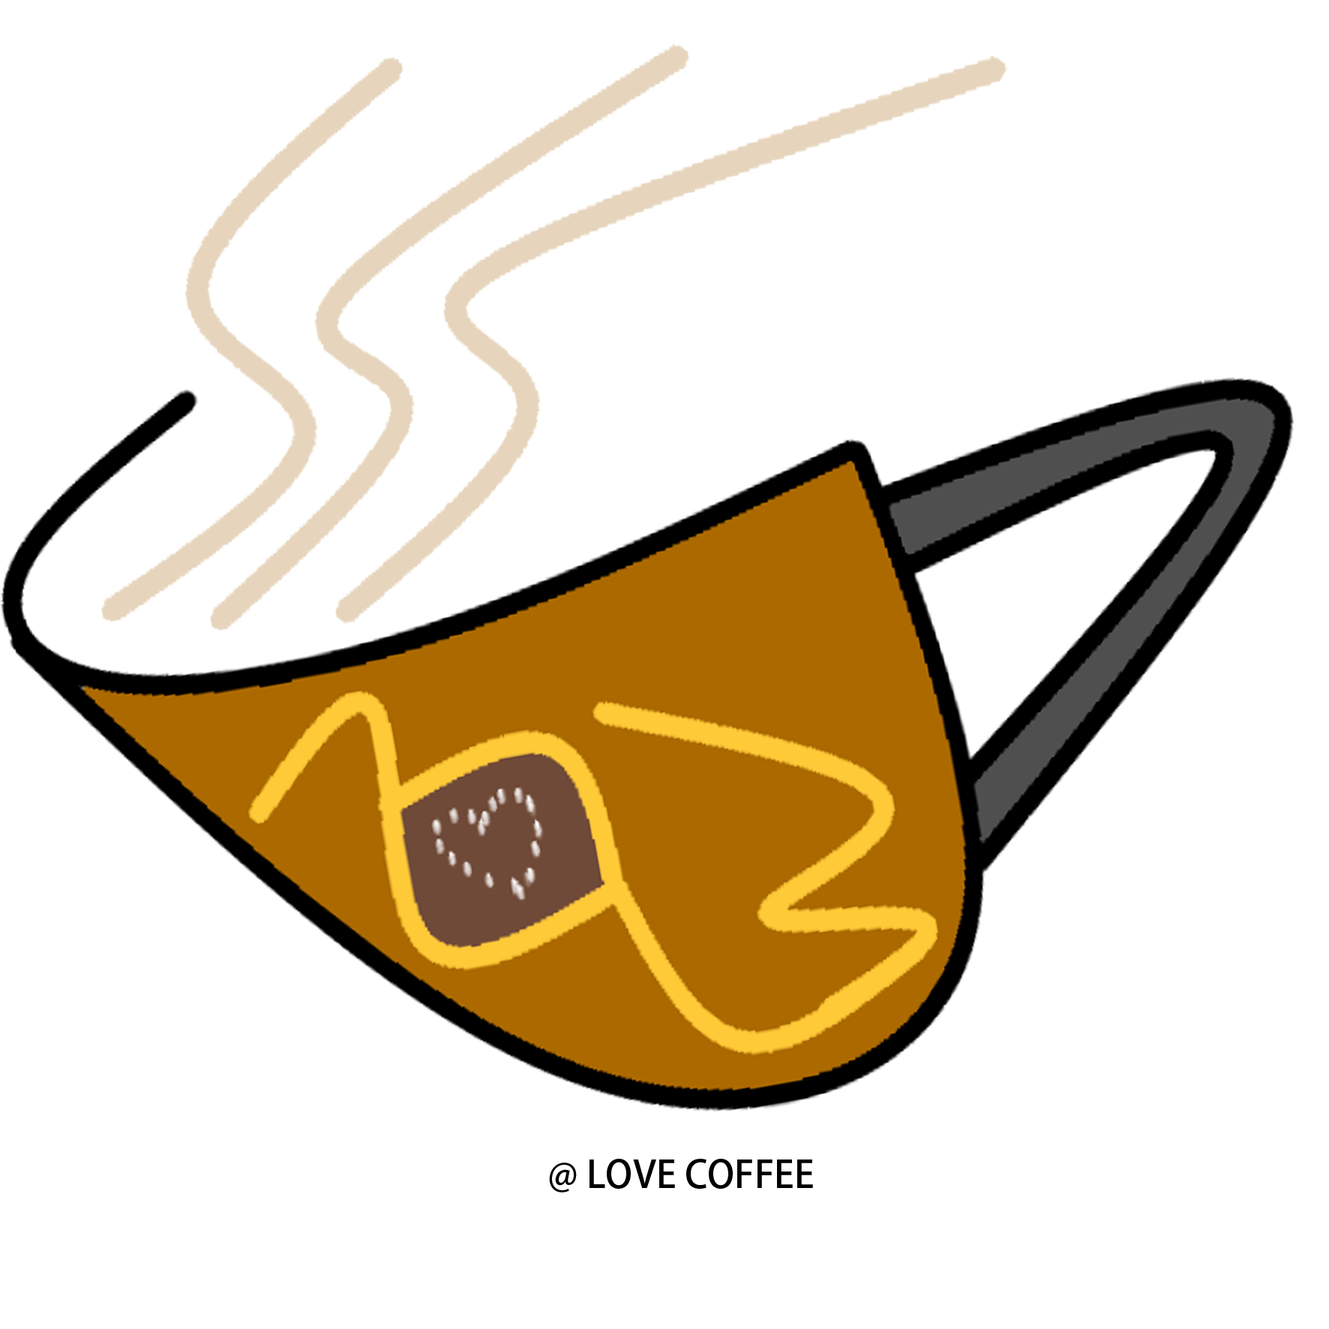
<style>
.page{position:relative;width:1329px;height:1329px;background:#ffffff}
.page>*{position:absolute;margin:0}
.t1{font:9px "AdobeFanHeitiStd-Bold";color:#000000}
</style>
<div class="page">
<p class="t1" style="left:549px;top:1159px;width:264px;height:33px">@ LOVE COFFEE</p>
</div>
